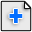
<style>
.page{position:relative;width:32px;height:32px;background:#eaeaea}
.page>*{position:absolute;margin:0}
.t1{font:24px "Arial-Black";letter-spacing:0.025em;color:#056fff}
</style>
<div class="page">
<p class="t1" style="left:9px;top:9px;width:14px;height:14px">+</p>
</div>
